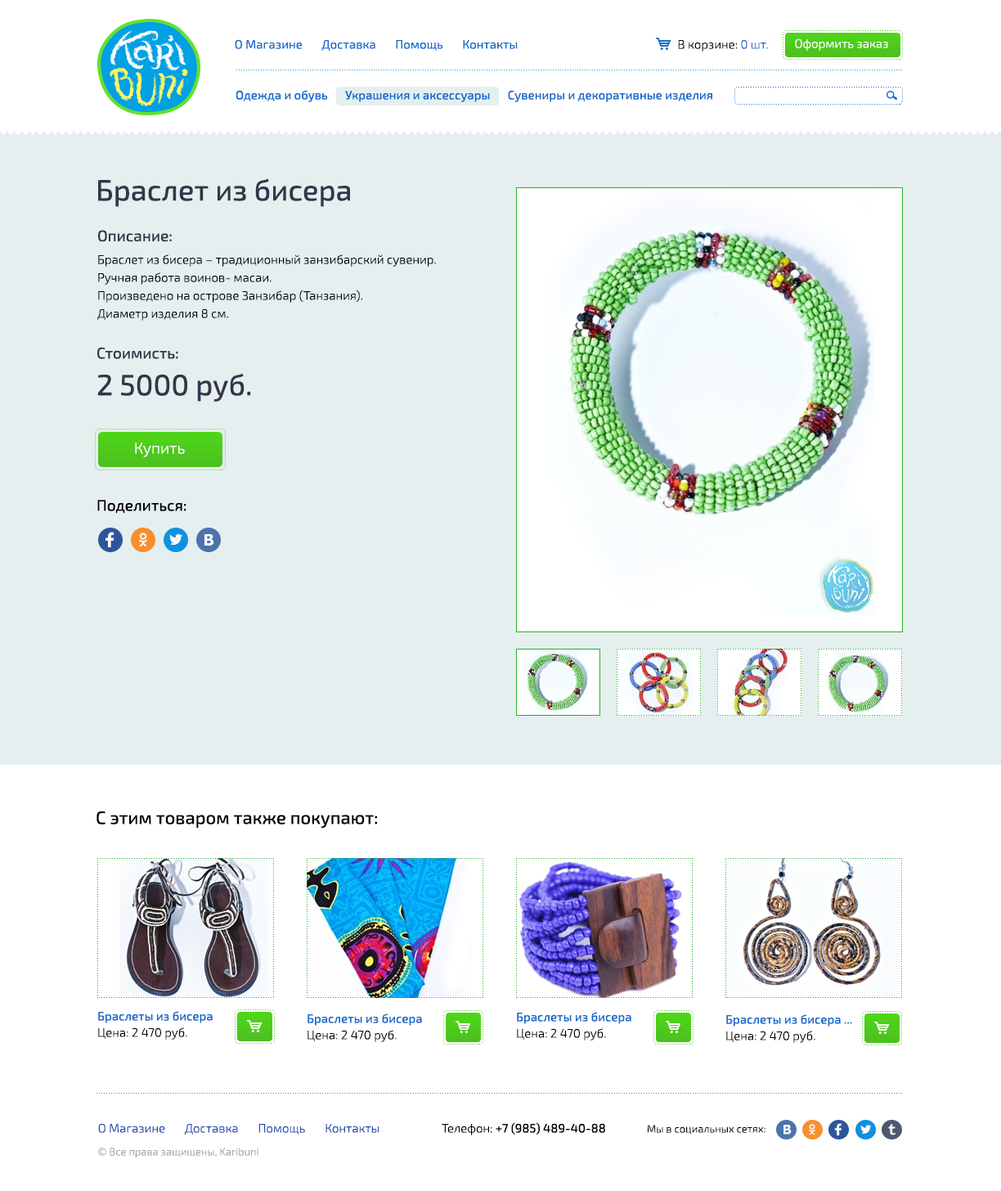
<style>
.page{position:relative;width:1001px;height:1191px;background:#ffffff}
.page>*{position:absolute;margin:0}
.t1{font:12.3px "Exo2-Regular";color:#126acd}
.t2{font:12.3px "Exo2-Light";color:#000000}
.t3{font:12.3px "Exo2-Light";color:#126acd}
.t4{font:12.3px "Exo2-Light";color:#ffffff}
.t5{font:12.3px "Exo2-Medium";color:#126acd}
.t6{font:29.4px "Exo2-Medium";color:#353549}
.t7{font:15.5px "Exo2-Medium";color:#353549}
.t8{font:12.3px/18px "Exo2-Light";color:#000000}
.t9{font:12.3px/18px "Exo2-Regular";color:#000000}
.t10{font:29.4px/36.8px "Exo2-Medium";color:#353549}
.t11{font:15.5px/39.3px "Exo2-Medium";color:#353549}
.t12{font:15.5px "Exo2-Light";color:#ffffff}
.t13{font:15.5px "Exo2-Medium";color:#000000}
.t14{font:18px "Exo2-Medium";color:#000000}
.t15{font:12.3px/16.4px "Exo2-Medium";color:#126acd}
.t16{font:12.3px/16.4px "Exo2-Light";color:#000000}
.t17{font:12.3px "Exo2-Light";color:#1e45ab}
.t18{font:12.3px "Exo2-Medium";color:#000000}
.t19{font:10.6px "Exo2-Light";color:#000000}
.t20{font:10.6px "Exo2-Light";color:#a3a3a3}
</style>
<div class="page">
<p class="t1" style="left:235px;top:39px;width:283px;height:12px">О Магазине       Доставка       Помощь       Контакты</p>
<p class="t2" style="left:678px;top:39px;width:90px;height:13px">В корзине: <span class="t3">0 шт.</span></p>
<p class="t4" style="left:795px;top:38px;width:93px;height:13px">Оформить заказ</p>
<p class="t5" style="left:236px;top:90px;width:476px;height:12px">Одежда и обувь       Украшения и аксессуары       Сувениры и декоративные изделия</p>
<p class="t6" style="left:98px;top:178px;width:252px;height:29px">Браслет из бисера</p>
<p class="t7" style="left:98px;top:230px;width:74px;height:12px">Описание:</p>
<p class="t8" style="left:97px;top:254px;width:339px;height:67px">Браслет из бисера – традиционный занзибарский сувенир. <br>Ручная работа воинов- масаи. <br>Произведено на острове Занзибар (Танзания).<br>Диаметр изделия 8 см.<br><span class="t9">Ширина изделия 1 см.</span></p>
<p class="t10" style="left:97px;top:347px;width:154px;height:55px"><span class="t11">Стоимисть:<br></span>2 5000 руб.</p>
<p class="t12" style="left:135px;top:443px;width:50px;height:14px">Купить</p>
<p class="t13" style="left:97px;top:500px;width:90px;height:14px">Поделиться:</p>
<p class="t14" style="left:97px;top:811px;width:280px;height:17px">C этим товаром также покупают:</p>
<p class="t15" style="left:98px;top:1011px;width:115px;height:29px">Браслеты из бисера<br><span class="t16">Цена: 2 470 руб.</span></p>
<p class="t15" style="left:308px;top:1013px;width:114px;height:29px">Браслеты из бисера<br><span class="t16">Цена: 2 470 руб.</span></p>
<p class="t15" style="left:517px;top:1012px;width:114px;height:28px">Браслеты из бисера<br><span class="t16">Цена: 2 470 руб.</span></p>
<p class="t15" style="left:726px;top:1014px;width:126px;height:29px">Браслеты из бисера ...<br><span class="t16">Цена: 2 470 руб.</span></p>
<p class="t17" style="left:98px;top:1123px;width:281px;height:12px">О Магазине       Доставка       Помощь       Контакты</p>
<p class="t18" style="left:442px;top:1122px;width:163px;height:13px"><span class="t2">Телефон: </span>+7 (985) 489-40-88</p>
<p class="t19" style="left:648px;top:1125px;width:118px;height:10px">Мы в социальных сетях:</p>
<p class="t20" style="left:98px;top:1148px;width:160px;height:10px">© Все права защищены, Karibuni</p>
</div>
